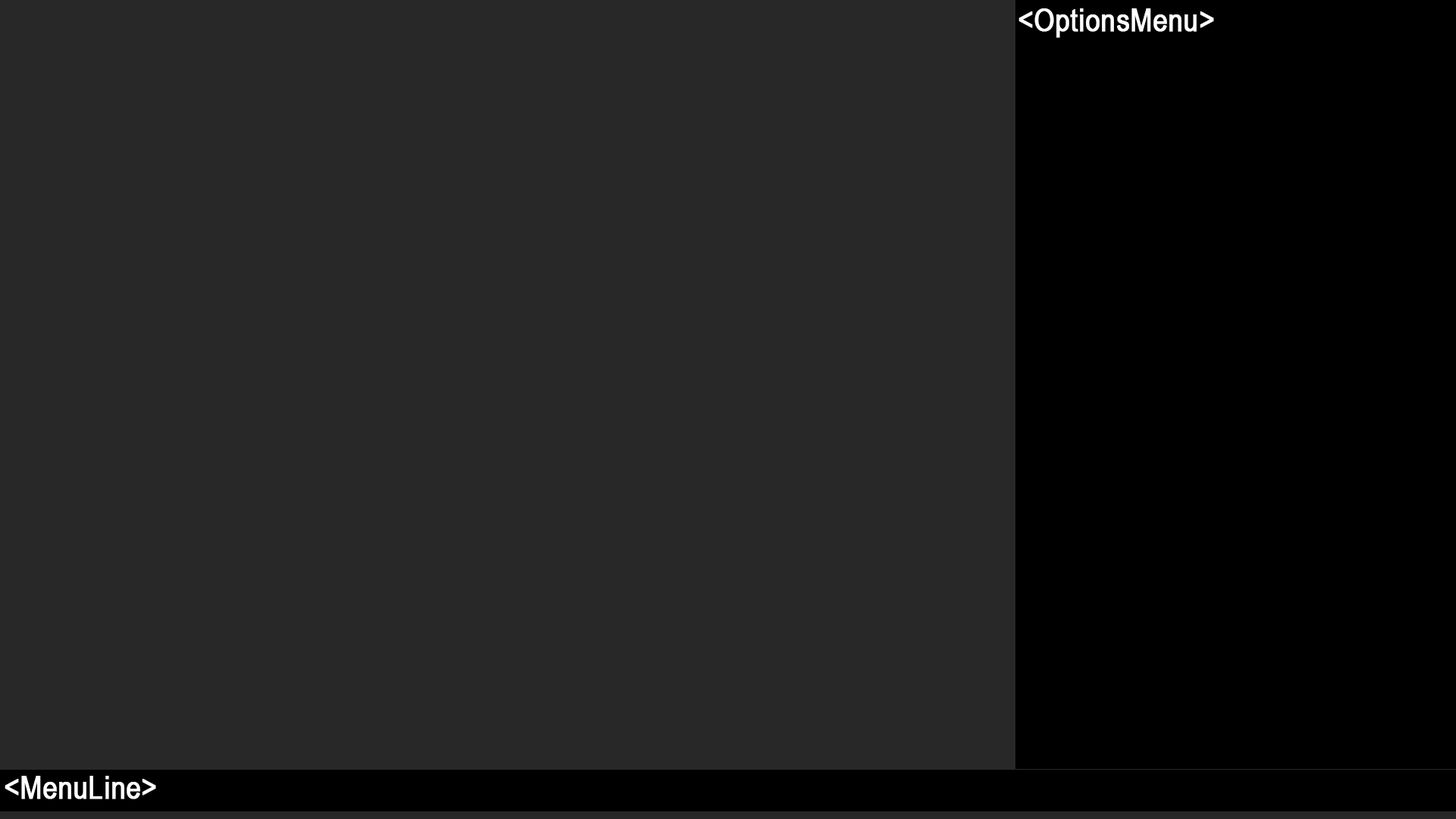
<style>
.page{position:relative;width:1456px;height:819px;background:#282828}
.page>*{position:absolute;margin:0}
.t1{font:31.9px "ArialNarrow";color:#ffffff;font-weight:bold}
</style>
<div class="page">
<p class="t1" style="left:1018px;top:8px;width:196px;height:30px">&lt;OptionsMenu&gt;</p>
<p class="t1" style="left:5px;top:776px;width:151px;height:23px">&lt;MenuLine&gt;</p>
</div>
